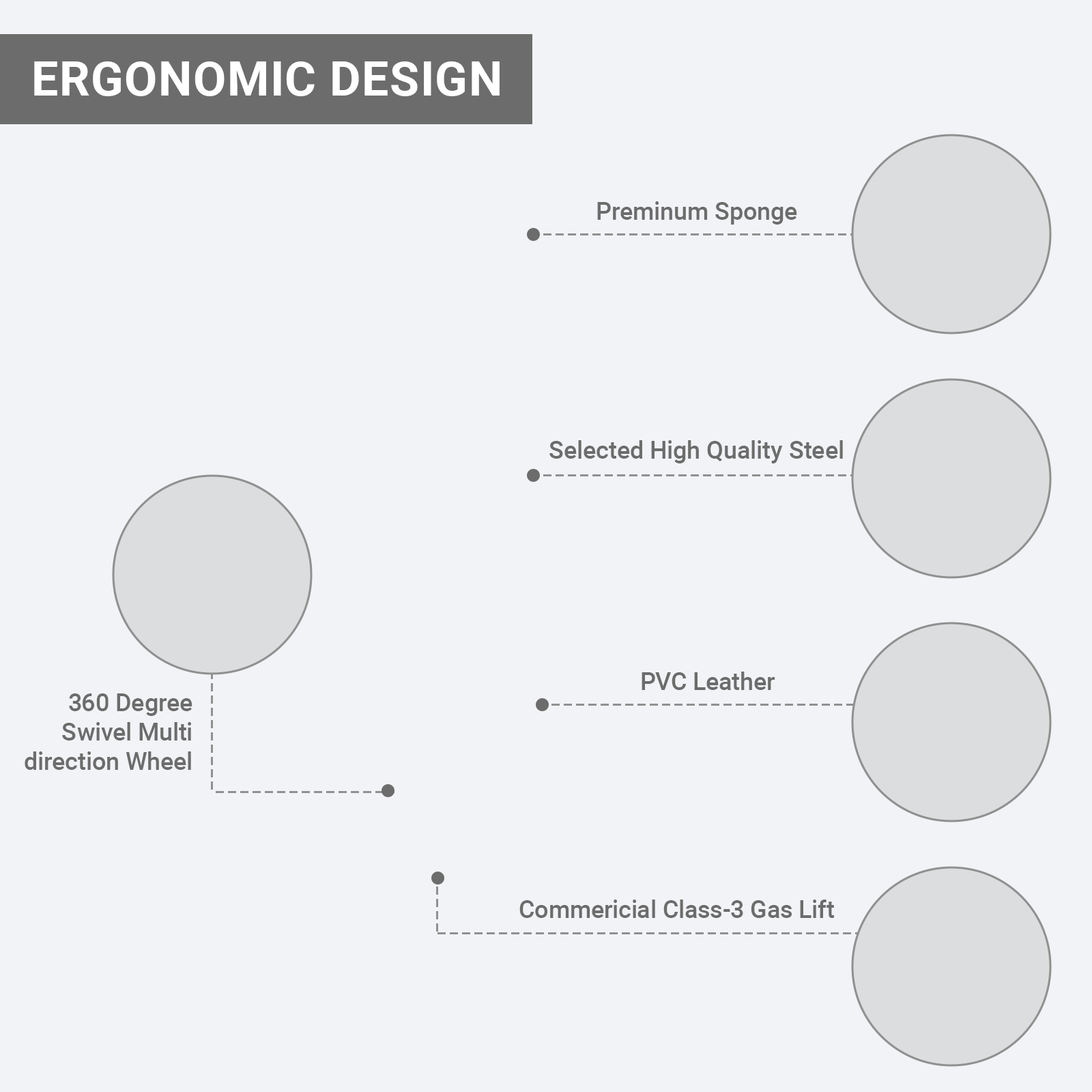
<style>
.page{position:relative;width:1092px;height:1092px;background:#f2f3f6}
.page>*{position:absolute;margin:0}
.t1{font:47.8px "Roboto-Bold";color:#ffffff;text-transform:uppercase}
.t2{font:24.6px "Roboto-Medium";color:#6c6c6c}
</style>
<div class="page">
<p class="t1" style="left:34px;top:61px;width:466px;height:35px">Ergonomic design</p>
<p class="t2" style="left:597px;top:201px;width:200px;height:24px">Preminum Sponge</p>
<p class="t2" style="left:549px;top:440px;width:294px;height:23px">Selected High Quality Steel</p>
<p class="t2" style="left:642px;top:672px;width:133px;height:18px">PVC Leather</p>
<p class="t2" style="left:25px;top:693px;width:167px;height:77px;text-align:right">360 Degree<br>Swivel Multi<br>direction Wheel</p>
<p class="t2" style="left:519px;top:900px;width:315px;height:18px">Commericial Class-3 Gas Lift</p>
</div>
